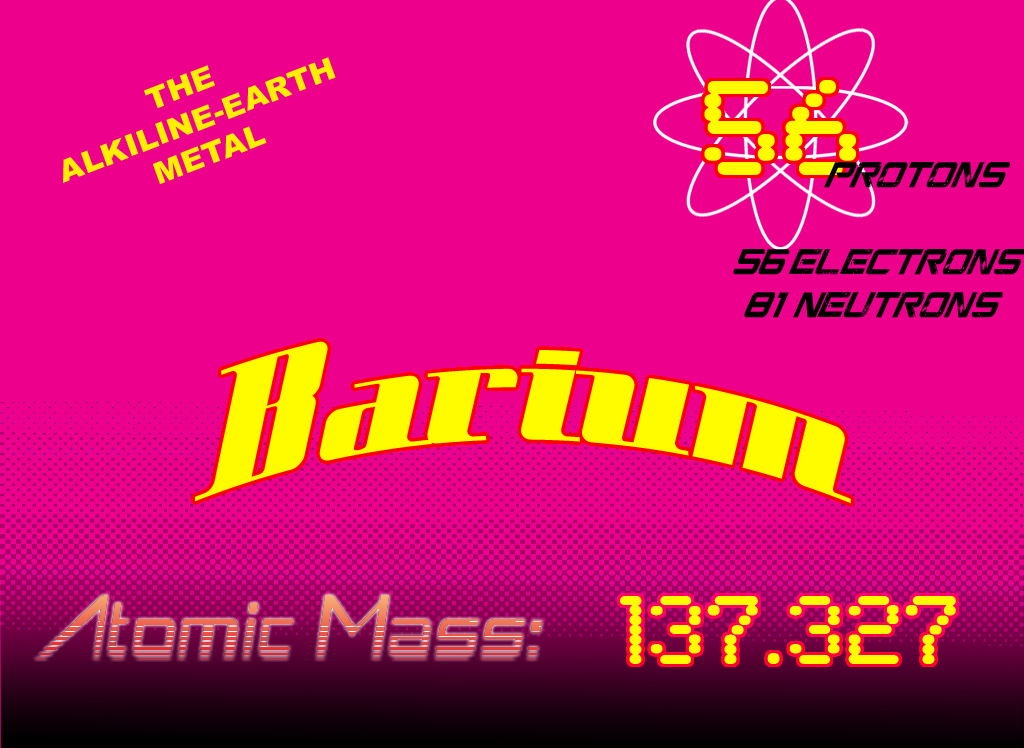
<style>
.page{position:relative;width:1024px;height:748px;background:#ed008c}
.page>*{position:absolute;margin:0}
.t1{font:30px "Arial-Black";color:#feef00;scale:1.04 1}
.t2{font:140px "SynchroLET";color:#fffc00}
.t3{font:39.4px "CGFLocustResistance";color:#000000;scale:0.67 1}
.t4{font:162.9px "SpaceCadetNF";color:#fffc00;scale:1.05 1}
.t5{font:100px "SynchroLET";color:#fffc00}
</style>
<div class="page">
<p class="t1" style="left:63px;top:57px;width:273px;height:128px;text-align:center;rotate:-21deg">THE <br>ALKILINE-EARTH<br>METAL</p>
<p class="t2" style="left:704px;top:80px;width:152px;height:95px">56</p>
<p class="t3" style="left:733px;top:162px;width:293px;height:156px;text-align:center">ProtonS<br><br>56 electrons<br>    81  Neutrons</p>
<p class="t4" style="left:195px;top:341px;width:656px;height:163px">Barium</p>
<p class="t5" style="left:620px;top:596px;width:336px;height:68px">137.327</p>
</div>
